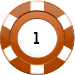
<style>
.page{position:relative;width:75px;height:75px;background:#ffffff}
.page>*{position:absolute;margin:0}
.t1{font:18px "Rockwell";color:#000000}
</style>
<div class="page">
<p class="t1" style="left:34px;top:32px;width:6px;height:12px">1</p>
</div>
